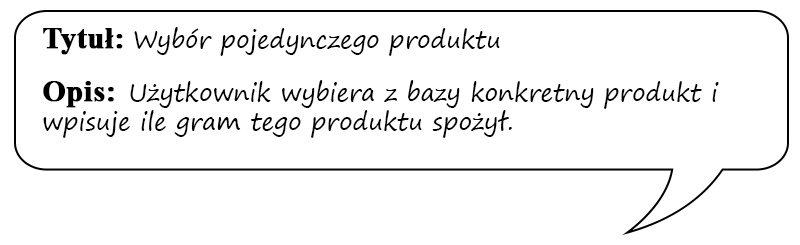
<style>
.page{position:relative;width:800px;height:245px;background:#ffffff}
.page>*{position:absolute;margin:0}
.t1{font:24px "SegoePrint";color:#000000}
.t2{font:30px "TimesNewRomanPS-BoldMT";color:#000000;font-weight:bold}
</style>
<div class="page">
<p class="t1" style="left:43px;top:27px;width:676px;height:111px"><span class="t2">Tytuł: </span>Wybór pojedynczego produktu<br><br><span class="t2">Opis:  </span>Użytkownik wybiera z bazy konkretny produkt i wpisuje ile gram tego produktu spożył.</p>
</div>
